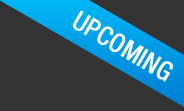
<style>
.page{position:relative;width:184px;height:111px;background:#333333}
.page>*{position:absolute;margin:0}
.t1{font:26px "HelveticaNeue-Condensed";color:#ffffff;font-weight:bold}
</style>
<div class="page">
<p class="t1" style="left:73px;top:10px;width:100px;height:72px;rotate:30deg">UPCOMING</p>
</div>
